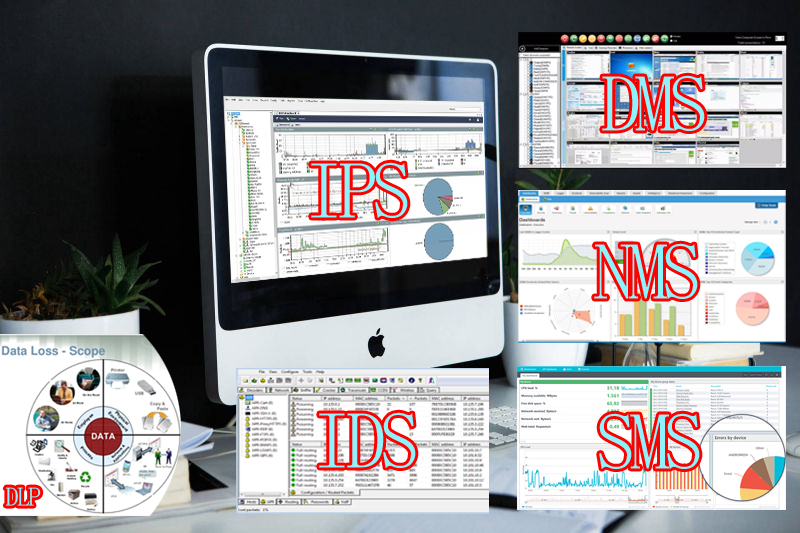
<style>
.page{position:relative;width:800px;height:533px}
.page>*{position:absolute;margin:0}
.t1{font:80.9px "SimSun-ExtB";letter-spacing:-0.08em;color:#8ef2fc}
.t2{font:26.4px "SimSun-ExtB";letter-spacing:-0.08em;color:#8ef2fc}
</style>
<div class="page">
<p class="t1" style="left:602px;top:75px;width:103px;height:56px">DMS</p>
<p class="t1" style="left:311px;top:162px;width:97px;height:56px">IPS</p>
<p class="t1" style="left:594px;top:243px;width:104px;height:56px">NMS</p>
<p class="t1" style="left:319px;top:412px;width:97px;height:56px">IDS</p>
<p class="t1" style="left:599px;top:413px;width:101px;height:56px">SMS</p>
<p class="t2" style="left:5px;top:487px;width:36px;height:19px">DLP</p>
</div>
